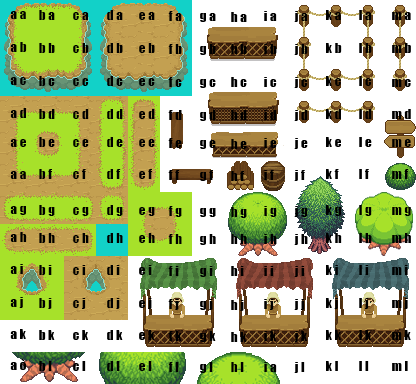
<style>
.page{position:relative;width:416px;height:384px;background:#ffffff}
.page>*{position:absolute;margin:0}
.t1{font:13px "Impact";letter-spacing:0.015em;color:#000000}
</style>
<div class="page">
<p class="t1" style="left:10px;top:11px;width:16px;height:8px">a a</p>
<p class="t1" style="left:39px;top:10px;width:16px;height:10px">b a</p>
<p class="t1" style="left:73px;top:12px;width:16px;height:8px">c a</p>
<p class="t1" style="left:107px;top:10px;width:16px;height:10px">d a</p>
<p class="t1" style="left:139px;top:12px;width:16px;height:8px">e a</p>
<p class="t1" style="left:168px;top:11px;width:14px;height:10px">f a</p>
<p class="t1" style="left:200px;top:13px;width:16px;height:9px">g a</p>
<p class="t1" style="left:231px;top:12px;width:16px;height:10px">h a</p>
<p class="t1" style="left:264px;top:11px;width:13px;height:10px">i a</p>
<p class="t1" style="left:294px;top:11px;width:14px;height:11px">j a</p>
<p class="t1" style="left:326px;top:10px;width:15px;height:10px">k a</p>
<p class="t1" style="left:359px;top:10px;width:13px;height:10px">l a</p>
<p class="t1" style="left:392px;top:12px;width:19px;height:8px">m a</p>
<p class="t1" style="left:10px;top:42px;width:17px;height:10px">a b</p>
<p class="t1" style="left:39px;top:43px;width:16px;height:10px">b b</p>
<p class="t1" style="left:73px;top:43px;width:16px;height:10px">c b</p>
<p class="t1" style="left:107px;top:43px;width:16px;height:10px">d b</p>
<p class="t1" style="left:139px;top:43px;width:16px;height:10px">e b</p>
<p class="t1" style="left:168px;top:44px;width:14px;height:10px">f b</p>
<p class="t1" style="left:200px;top:44px;width:16px;height:11px">g b</p>
<p class="t1" style="left:231px;top:44px;width:16px;height:10px">h b</p>
<p class="t1" style="left:264px;top:44px;width:13px;height:10px">i b</p>
<p class="t1" style="left:294px;top:44px;width:14px;height:11px">j b</p>
<p class="t1" style="left:326px;top:43px;width:16px;height:10px">k b</p>
<p class="t1" style="left:359px;top:43px;width:13px;height:10px">l b</p>
<p class="t1" style="left:392px;top:43px;width:19px;height:10px">m b</p>
<p class="t1" style="left:10px;top:77px;width:16px;height:8px">a c</p>
<p class="t1" style="left:39px;top:76px;width:16px;height:10px">b c</p>
<p class="t1" style="left:73px;top:78px;width:16px;height:8px">c c</p>
<p class="t1" style="left:107px;top:76px;width:16px;height:10px">d c</p>
<p class="t1" style="left:139px;top:78px;width:16px;height:8px">e c</p>
<p class="t1" style="left:168px;top:77px;width:14px;height:10px">f c</p>
<p class="t1" style="left:231px;top:77px;width:16px;height:10px">h c</p>
<p class="t1" style="left:264px;top:77px;width:13px;height:10px">i c</p>
<p class="t1" style="left:294px;top:77px;width:14px;height:11px">j c</p>
<p class="t1" style="left:326px;top:76px;width:15px;height:10px">k c</p>
<p class="t1" style="left:359px;top:76px;width:13px;height:10px">l c</p>
<p class="t1" style="left:200px;top:79px;width:16px;height:9px">g c</p>
<p class="t1" style="left:392px;top:79px;width:19px;height:8px">m c</p>
<p class="t1" style="left:10px;top:108px;width:16px;height:10px">a d</p>
<p class="t1" style="left:39px;top:109px;width:16px;height:10px">b d</p>
<p class="t1" style="left:73px;top:109px;width:16px;height:10px">c d</p>
<p class="t1" style="left:107px;top:109px;width:16px;height:10px">d d</p>
<p class="t1" style="left:139px;top:109px;width:16px;height:10px">e d</p>
<p class="t1" style="left:168px;top:110px;width:14px;height:10px">f d</p>
<p class="t1" style="left:200px;top:110px;width:16px;height:11px">g d</p>
<p class="t1" style="left:231px;top:110px;width:16px;height:10px">h d</p>
<p class="t1" style="left:264px;top:110px;width:13px;height:10px">i d</p>
<p class="t1" style="left:294px;top:110px;width:14px;height:11px">j d</p>
<p class="t1" style="left:326px;top:109px;width:15px;height:10px">k d</p>
<p class="t1" style="left:359px;top:109px;width:13px;height:10px">l d</p>
<p class="t1" style="left:392px;top:109px;width:19px;height:10px">m d</p>
<p class="t1" style="left:39px;top:137px;width:16px;height:10px">b e</p>
<p class="t1" style="left:107px;top:137px;width:16px;height:10px">d e</p>
<p class="t1" style="left:326px;top:137px;width:15px;height:10px">k e</p>
<p class="t1" style="left:359px;top:137px;width:13px;height:10px">l e</p>
<p class="t1" style="left:10px;top:139px;width:16px;height:8px">a e</p>
<p class="t1" style="left:73px;top:139px;width:16px;height:8px">c e</p>
<p class="t1" style="left:139px;top:139px;width:16px;height:8px">e e</p>
<p class="t1" style="left:168px;top:138px;width:14px;height:10px">f e</p>
<p class="t1" style="left:200px;top:140px;width:16px;height:9px">g e</p>
<p class="t1" style="left:231px;top:139px;width:16px;height:10px">h e</p>
<p class="t1" style="left:264px;top:138px;width:13px;height:10px">i e</p>
<p class="t1" style="left:294px;top:138px;width:14px;height:11px">j e</p>
<p class="t1" style="left:392px;top:139px;width:19px;height:8px">m e</p>
<p class="t1" style="left:10px;top:171px;width:16px;height:8px">a a</p>
<p class="t1" style="left:39px;top:169px;width:13px;height:10px">b f</p>
<p class="t1" style="left:73px;top:169px;width:13px;height:10px">c f</p>
<p class="t1" style="left:107px;top:169px;width:13px;height:10px">d f</p>
<p class="t1" style="left:139px;top:169px;width:13px;height:10px">e f</p>
<p class="t1" style="left:168px;top:170px;width:11px;height:10px">f f</p>
<p class="t1" style="left:200px;top:170px;width:13px;height:11px">g f</p>
<p class="t1" style="left:231px;top:171px;width:13px;height:10px">h f</p>
<p class="t1" style="left:264px;top:170px;width:10px;height:10px">i f</p>
<p class="t1" style="left:294px;top:170px;width:11px;height:11px">j f</p>
<p class="t1" style="left:326px;top:169px;width:13px;height:10px">k f</p>
<p class="t1" style="left:359px;top:169px;width:10px;height:10px">l f</p>
<p class="t1" style="left:392px;top:169px;width:17px;height:10px">m f</p>
<p class="t1" style="left:10px;top:206px;width:16px;height:9px">a g</p>
<p class="t1" style="left:39px;top:205px;width:16px;height:11px">b g</p>
<p class="t1" style="left:73px;top:207px;width:16px;height:9px">c g</p>
<p class="t1" style="left:107px;top:205px;width:16px;height:11px">d g</p>
<p class="t1" style="left:139px;top:207px;width:16px;height:9px">e g</p>
<p class="t1" style="left:168px;top:206px;width:14px;height:11px">f g</p>
<p class="t1" style="left:200px;top:208px;width:16px;height:9px">g g</p>
<p class="t1" style="left:231px;top:207px;width:16px;height:11px">h g</p>
<p class="t1" style="left:264px;top:206px;width:13px;height:11px">i g</p>
<p class="t1" style="left:294px;top:206px;width:14px;height:11px">j g</p>
<p class="t1" style="left:326px;top:205px;width:15px;height:11px">k g</p>
<p class="t1" style="left:359px;top:205px;width:13px;height:11px">l g</p>
<p class="t1" style="left:392px;top:207px;width:19px;height:9px">m g</p>
<p class="t1" style="left:10px;top:232px;width:17px;height:10px">a h</p>
<p class="t1" style="left:39px;top:233px;width:16px;height:10px">b h</p>
<p class="t1" style="left:73px;top:233px;width:16px;height:10px">c h</p>
<p class="t1" style="left:107px;top:233px;width:16px;height:10px">d h</p>
<p class="t1" style="left:139px;top:233px;width:16px;height:10px">e h</p>
<p class="t1" style="left:326px;top:233px;width:16px;height:10px">k h</p>
<p class="t1" style="left:359px;top:233px;width:13px;height:10px">l h</p>
<p class="t1" style="left:392px;top:233px;width:19px;height:10px">m h</p>
<p class="t1" style="left:168px;top:234px;width:14px;height:10px">f h</p>
<p class="t1" style="left:200px;top:234px;width:16px;height:11px">g h</p>
<p class="t1" style="left:231px;top:234px;width:16px;height:10px">h h</p>
<p class="t1" style="left:264px;top:234px;width:13px;height:10px">i h</p>
<p class="t1" style="left:294px;top:234px;width:14px;height:11px">j h</p>
<p class="t1" style="left:10px;top:264px;width:13px;height:10px">a i</p>
<p class="t1" style="left:39px;top:265px;width:13px;height:10px">b i</p>
<p class="t1" style="left:73px;top:265px;width:13px;height:10px">c i</p>
<p class="t1" style="left:107px;top:265px;width:13px;height:10px">d i</p>
<p class="t1" style="left:139px;top:265px;width:13px;height:10px">e i</p>
<p class="t1" style="left:168px;top:266px;width:11px;height:10px">f i</p>
<p class="t1" style="left:200px;top:266px;width:13px;height:11px">g i</p>
<p class="t1" style="left:231px;top:266px;width:13px;height:10px">h i</p>
<p class="t1" style="left:264px;top:266px;width:10px;height:10px">i i</p>
<p class="t1" style="left:294px;top:266px;width:11px;height:11px">j i</p>
<p class="t1" style="left:326px;top:265px;width:12px;height:10px">k i</p>
<p class="t1" style="left:359px;top:265px;width:10px;height:10px">l i</p>
<p class="t1" style="left:392px;top:265px;width:16px;height:10px">m i</p>
<p class="t1" style="left:10px;top:297px;width:13px;height:11px">a j</p>
<p class="t1" style="left:39px;top:298px;width:13px;height:11px">b j</p>
<p class="t1" style="left:73px;top:298px;width:13px;height:11px">c j</p>
<p class="t1" style="left:107px;top:298px;width:13px;height:11px">d j</p>
<p class="t1" style="left:139px;top:298px;width:13px;height:11px">e j</p>
<p class="t1" style="left:168px;top:299px;width:11px;height:11px">f j</p>
<p class="t1" style="left:200px;top:299px;width:13px;height:11px">g j</p>
<p class="t1" style="left:231px;top:300px;width:13px;height:11px">h j</p>
<p class="t1" style="left:264px;top:299px;width:10px;height:11px">i j</p>
<p class="t1" style="left:294px;top:299px;width:11px;height:11px">j j</p>
<p class="t1" style="left:326px;top:298px;width:12px;height:11px">k j</p>
<p class="t1" style="left:359px;top:298px;width:10px;height:11px">l j</p>
<p class="t1" style="left:392px;top:298px;width:16px;height:11px">m j</p>
<p class="t1" style="left:10px;top:329px;width:16px;height:10px">a k</p>
<p class="t1" style="left:39px;top:330px;width:16px;height:10px">b k</p>
<p class="t1" style="left:73px;top:330px;width:15px;height:10px">c k</p>
<p class="t1" style="left:107px;top:330px;width:16px;height:10px">d k</p>
<p class="t1" style="left:139px;top:330px;width:16px;height:10px">e k</p>
<p class="t1" style="left:168px;top:331px;width:14px;height:10px">f k</p>
<p class="t1" style="left:200px;top:331px;width:16px;height:11px">g k</p>
<p class="t1" style="left:231px;top:332px;width:16px;height:10px">h k</p>
<p class="t1" style="left:264px;top:331px;width:12px;height:10px">i k</p>
<p class="t1" style="left:294px;top:331px;width:13px;height:11px">j k</p>
<p class="t1" style="left:326px;top:330px;width:15px;height:10px">k k</p>
<p class="t1" style="left:359px;top:330px;width:12px;height:10px">l k</p>
<p class="t1" style="left:392px;top:330px;width:19px;height:10px">m k</p>
<p class="t1" style="left:10px;top:359px;width:16px;height:11px">a ò</p>
<p class="t1" style="left:39px;top:361px;width:13px;height:10px">b l</p>
<p class="t1" style="left:73px;top:361px;width:13px;height:10px">c l</p>
<p class="t1" style="left:107px;top:361px;width:13px;height:10px">d l</p>
<p class="t1" style="left:139px;top:361px;width:13px;height:10px">e l</p>
<p class="t1" style="left:168px;top:362px;width:11px;height:10px">f l</p>
<p class="t1" style="left:200px;top:362px;width:13px;height:11px">g l</p>
<p class="t1" style="left:231px;top:362px;width:13px;height:10px">h l</p>
<p class="t1" style="left:264px;top:362px;width:13px;height:10px">i a</p>
<p class="t1" style="left:294px;top:362px;width:11px;height:11px">j l</p>
<p class="t1" style="left:326px;top:361px;width:12px;height:10px">k l</p>
<p class="t1" style="left:359px;top:361px;width:10px;height:10px">l l</p>
<p class="t1" style="left:392px;top:361px;width:16px;height:10px">m l</p>
</div>
